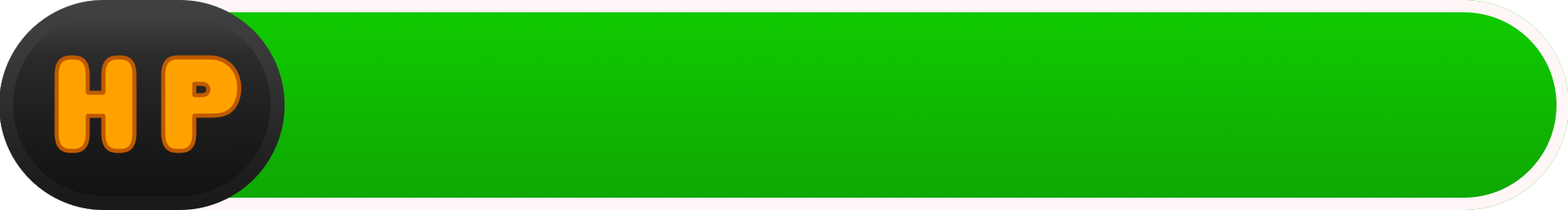
<style>
.page{position:relative;width:1568px;height:210px}
.page>*{position:absolute;margin:0}
.t1{font:124.9px "HWTGothicRound";letter-spacing:0.18em;color:#ffa200;font-weight:bold;scale:0.89 1}
</style>
<div class="page">
<p class="t1" style="left:57px;top:57px;width:182px;height:94px">HP</p>
</div>
